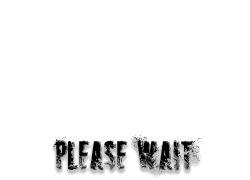
<style>
.page{position:relative;width:250px;height:180px;background:#ffffff}
.page>*{position:absolute;margin:0}
.t1{font:42px "SNIPER";color:#000000}
</style>
<div class="page">
<p class="t1" style="left:53px;top:135px;width:149px;height:40px">Please wait</p>
</div>
